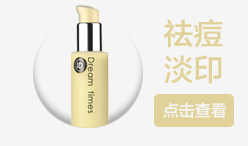
<style>
.page{position:relative;width:248px;height:146px;background:#f5f5f5}
.page>*{position:absolute;margin:0}
.t1{font:30px/36px "FZLTZHK--GBK1-0";color:#e0d299}
.t2{font:16px "FZLTZHK--GBK1-0";color:#f5f5f5}
</style>
<div class="page">
<p class="t1" style="left:164px;top:19px;width:59px;height:65px">祛痘<br>淡印</p>
<p class="t2" style="left:163px;top:102px;width:64px;height:16px">点击查看</p>
</div>
